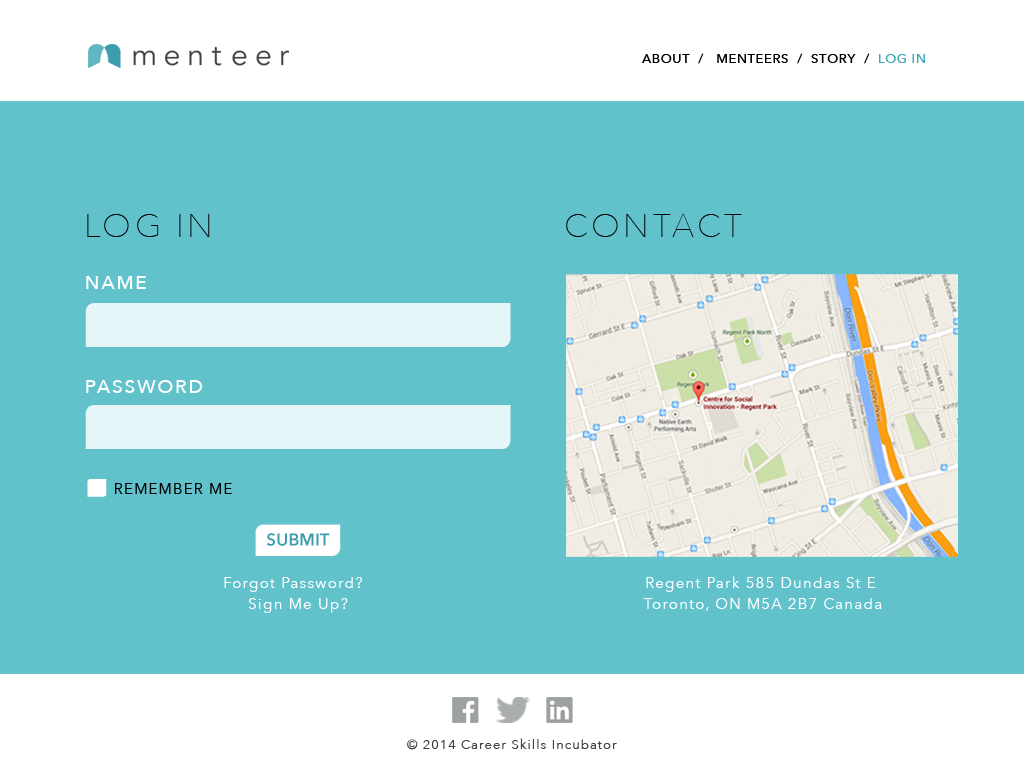
<style>
.page{position:relative;width:1024px;height:768px;background:#62c2cc}
.page>*{position:absolute;margin:0}
.t1{font:12.5px "AvenirNext-Medium";letter-spacing:0.075em;color:#000000}
.t2{font:12.5px "AvenirNext-Medium";letter-spacing:0.075em;color:#3ea8ba}
.t3{font:33.3px "AvenirNext-UltraLight";letter-spacing:0.1em;color:#000000}
.t4{font:18.8px "AvenirNext-Medium";letter-spacing:0.1em;color:#ffffff}
.t5{font:14.6px "AvenirNext-Regular";letter-spacing:0.1em;color:#000000}
.t6{font:14.6px/20.8px "AvenirNext-Regular";letter-spacing:0.1em;color:#ffffff}
.t7{font:12.5px "AvenirNext-Regular";letter-spacing:0.1em;color:#3e4243}
</style>
<div class="page">
<p class="t1" style="left:641px;top:53px;width:284px;height:11px">ABOUT  /   MENTEERS  /  STORY  /  <span class="t2">LOG IN</span></p>
<p class="t3" style="left:87px;top:214px;width:123px;height:23px">LOG IN</p>
<p class="t3" style="left:566px;top:213px;width:176px;height:24px">CONTACT</p>
<p class="t4" style="left:86px;top:276px;width:60px;height:13px">NAME</p>
<p class="t4" style="left:86px;top:380px;width:117px;height:13px">PASSWORD</p>
<p class="t5" style="left:115px;top:483px;width:117px;height:11px">REMEMBER ME</p>
<p class="t6" style="left:224px;top:577px;width:138px;height:36px;text-align:center">Forgot Password?  <br>Sign Me Up?</p>
<p class="t6" style="left:643px;top:576px;width:239px;height:35px;text-align:center">Regent Park 585 Dundas St E <br>Toronto, ON M5A 2B7 Canada</p>
<p class="t7" style="left:407px;top:738px;width:210px;height:12px">© 2014 Career Skills Incubator</p>
</div>
